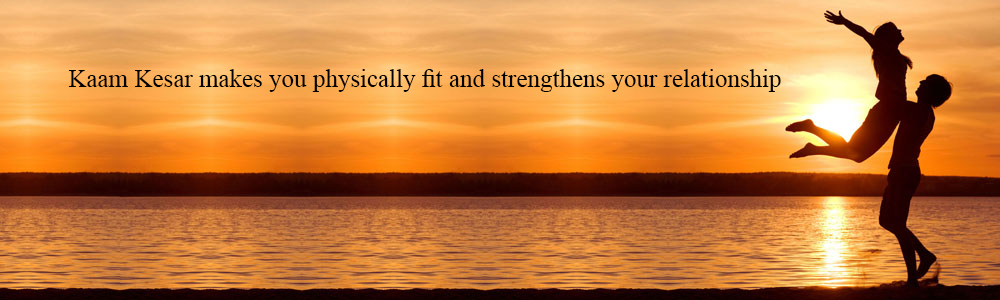
<style>
.page{position:relative;width:1000px;height:300px}
.page>*{position:absolute;margin:0}
.t1{font:25px "TimesNewRomanPSMT";color:#000000}
</style>
<div class="page">
<p class="t1" style="left:68px;top:69px;width:713px;height:23px">Kaam Kesar makes you physically fit and strengthens your relationship</p>
</div>
